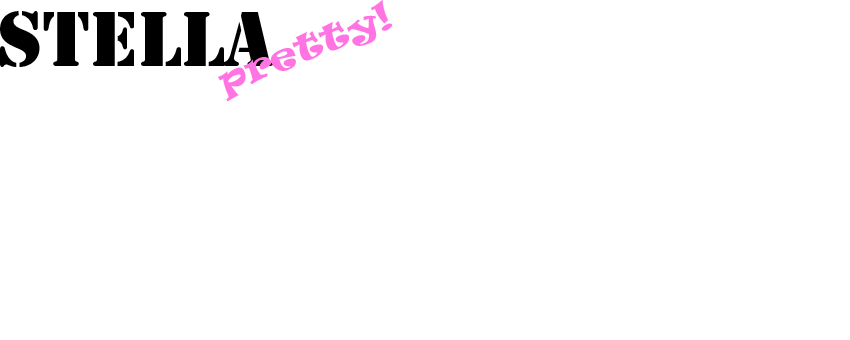
<style>
.page{position:relative;width:850px;height:340px;background:#ffffff}
.page>*{position:absolute;margin:0}
.t1{font:35.8px "Ravie";color:#ff73e3}
.t2{font:72px "StencilStd";color:#000000}
</style>
<div class="page">
<p class="t1" style="left:218px;top:0px;width:175px;height:102px;rotate:-21deg">pretty!</p>
<p class="t2" style="left:0px;top:11px;width:273px;height:56px">stella</p>
</div>
